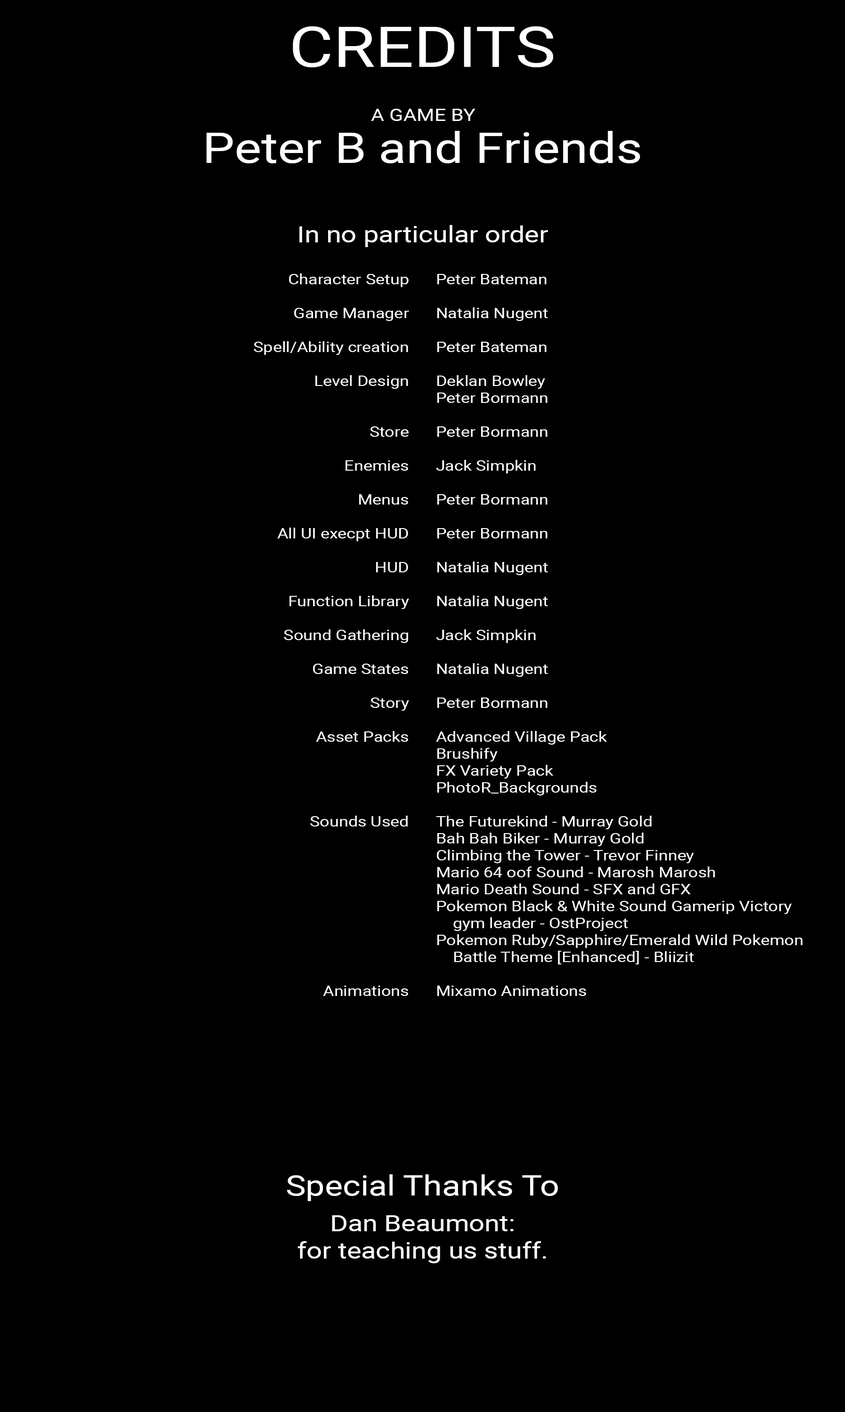
<style>
.page{position:relative;width:845px;height:1412px;background:#000000}
.page>*{position:absolute;margin:0}
.t1{font:56.5px "Roboto-Regular";color:#ffffff;scale:1.2 1}
.t2{font:16.9px "Roboto-Regular";color:#ffffff;scale:1.2 1}
.t3{font:42.4px "Roboto-Regular";color:#ffffff;scale:1.2 1}
.t4{font:22.6px "Roboto-Regular";color:#ffffff;scale:1.2 1}
.t5{font:14.1px "Roboto-Regular";color:#ffffff;scale:1.2 1}
.t6{font:28.2px "Roboto-Regular";color:#ffffff;scale:1.2 1}
</style>
<div class="page">
<p class="t1" style="left:293px;top:26px;width:260px;height:41px">CREDITS</p>
<p class="t2" style="left:371px;top:109px;width:104px;height:12px">A GAME BY</p>
<p class="t3" style="left:206px;top:131px;width:434px;height:32px">Peter B and Friends</p>
<p class="t4" style="left:299px;top:225px;width:249px;height:22px">In no particular order</p>
<p class="t5" style="left:254px;top:273px;width:155px;height:723px;text-align:right">Character Setup<br><br>Game Manager<br><br>Spell/Ability creation <br><br>Level Design<br><br><br>Store<br><br>Enemies<br><br>Menus<br><br>All UI execpt HUD<br><br>HUD <br><br>Function Library<br><br>Sound Gathering<br><br>Game States<br><br>Story <br><br>Asset Packs<br><br><br><br><br>Sounds Used<br><br><br><br><br><br><br><br><br><br>Animations</p>
<p class="t5" style="left:436px;top:274px;width:366px;height:722px">Peter Bateman<br><br>Natalia Nugent<br><br>Peter Bateman<br><br>Deklan Bowley<br>Peter Bormann<br><br>Peter Bormann<br><br>Jack Simpkin<br><br>Peter Bormann<br><br>Peter Bormann<br><br>Natalia Nugent<br><br>Natalia Nugent<br><br>Jack Simpkin<br><br>Natalia Nugent<br><br>Peter Bormann<br><br>Advanced Village Pack<br>Brushify<br>FX Variety Pack<br>PhotoR_Backgrounds<br><br>The Futurekind - Murray Gold<br>Bah Bah Biker - Murray Gold<br>Climbing the Tower - Trevor Finney<br>Mario 64 oof Sound - Marosh Marosh<br>Mario Death Sound - SFX and GFX<br>Pokemon Black &amp; White Sound Gamerip Victory <br> gym leader - OstProject<br>Pokemon Ruby/Sapphire/Emerald Wild Pokemon      Battle Theme [Enhanced] - Bliizit<br><br>Mixamo Animations</p>
<p class="t6" style="left:287px;top:1174px;width:271px;height:27px">Special Thanks To</p>
<p class="t4" style="left:297px;top:1215px;width:249px;height:48px;text-align:center">Dan Beaumont: <br>for teaching us stuff.</p>
</div>
